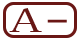
<style>
.page{position:relative;width:80px;height:40px;background:#ffffff}
.page>*{position:absolute;margin:0}
.t1{font:34.9px "SimSun";color:#681715;scale:1.95 1}
.t2{font:34.1px "MicrosoftYaHei";color:#6a1715;scale:1.9 1}
</style>
<div class="page">
<p class="t1" style="left:9px;top:8px;width:33px;height:24px">A</p>
<p class="t2" style="left:47px;top:19px;width:20px;height:4px">-</p>
</div>
